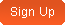
<style>
.page{position:relative;width:65px;height:25px}
.page>*{position:absolute;margin:0}
.t1{font:12px "ArialMT";letter-spacing:0.01em;color:#ffffff}
</style>
<div class="page">
<p class="t1" style="left:11px;top:7px;width:43px;height:11px">Sign Up</p>
</div>
